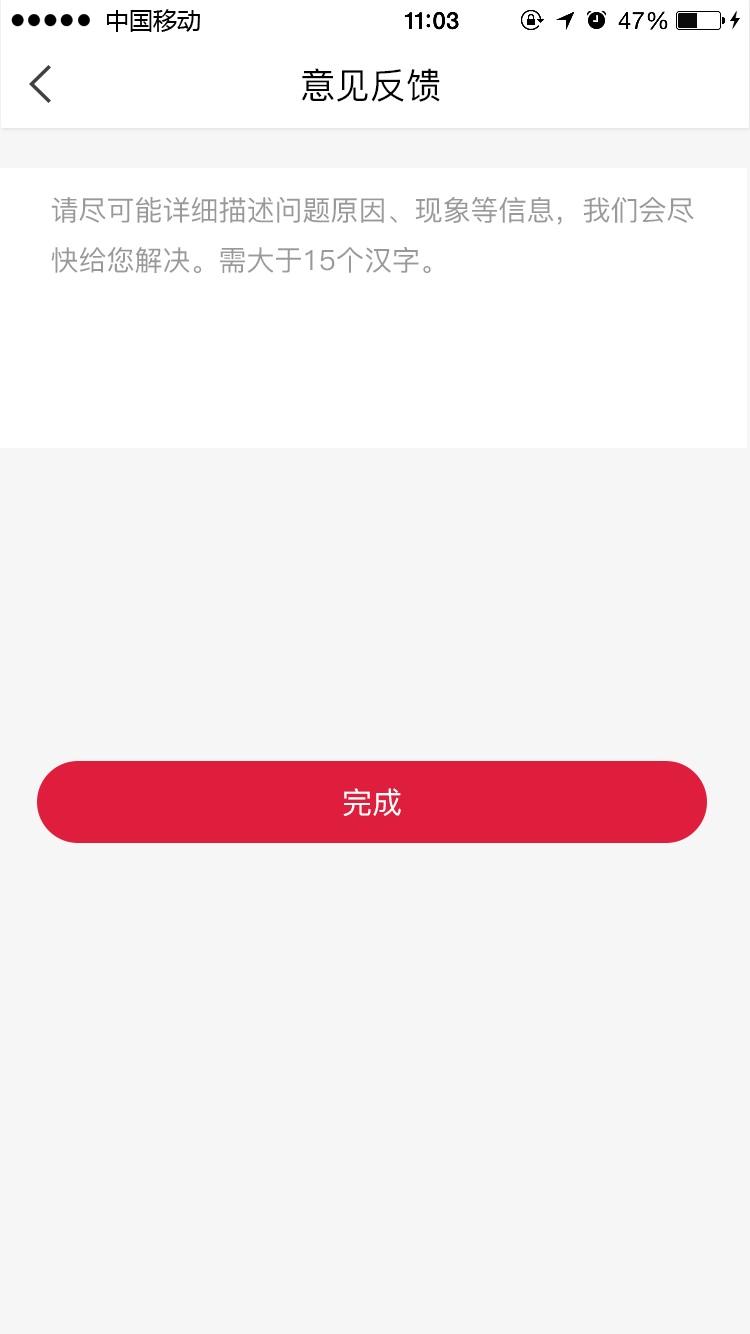
<style>
.page{position:relative;width:750px;height:1334px;background:#f6f6f6}
.page>*{position:absolute;margin:0}
.t1{font:35.7px "PingFang-SC-Medium";color:#000000}
.t2{font:28px/50px "PingFang-SC-Medium";color:#999999}
.t3{font:30px "PingFang-SC-Medium";color:#ffffff}
</style>
<div class="page">
<p class="t1" style="left:301px;top:68px;width:139px;height:34px">意见反馈</p>
<p class="t2" style="left:51px;top:196px;width:643px;height:77px">请尽可能详细描述问题原因、现象等信息，我们会尽快给您解决。需大于15个汉字。</p>
<p class="t3" style="left:343px;top:788px;width:58px;height:28px">完成</p>
</div>
